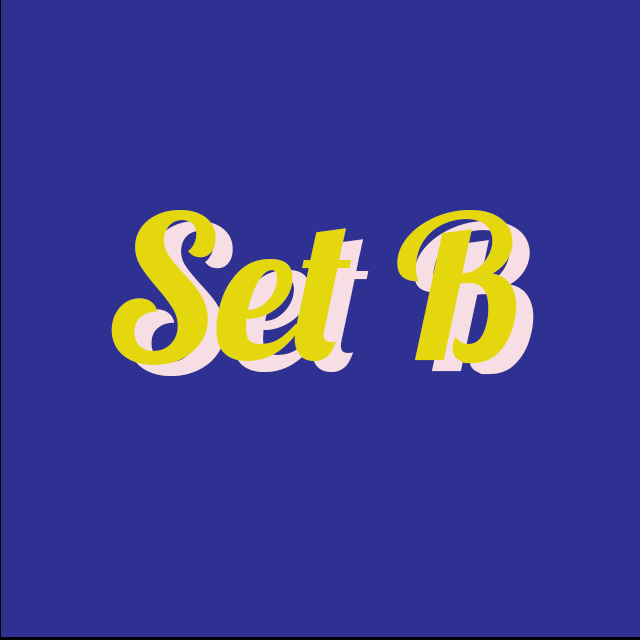
<style>
.page{position:relative;width:640px;height:640px;background:#2e3192}
.page>*{position:absolute;margin:0}
.t1{font:200px "Lobster-Regular";color:#e4d70d}
.t2{font:200px "Lobster-Regular"}
</style>
<div class="page">
<p class="t1" style="left:111px;top:210px;width:406px;height:155px">Set B</p>
<p class="t2" style="left:128px;top:221px;width:406px;height:155px">Set B</p>
</div>
